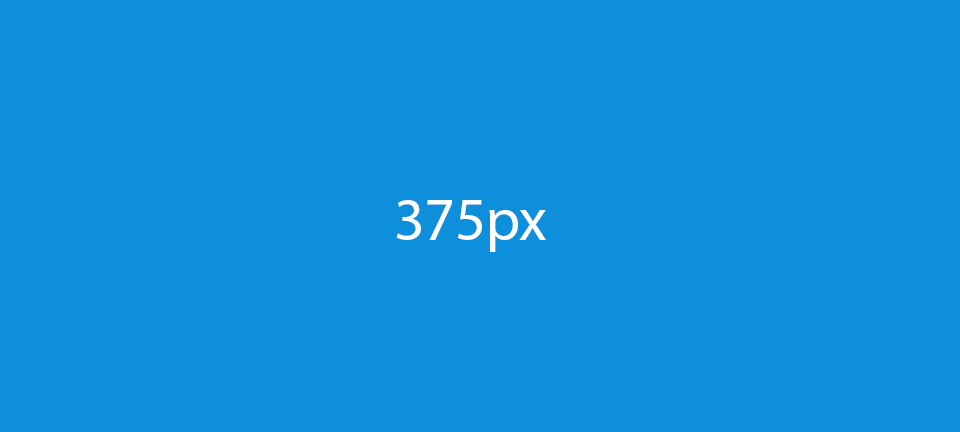
<style>
.page{position:relative;width:960px;height:432px;background:#0d8fdb}
.page>*{position:absolute;margin:0}
.t1{font:60px "MyriadPro-Regular";color:#ffffff}
</style>
<div class="page">
<p class="t1" style="left:396px;top:200px;width:150px;height:52px">375px</p>
</div>
